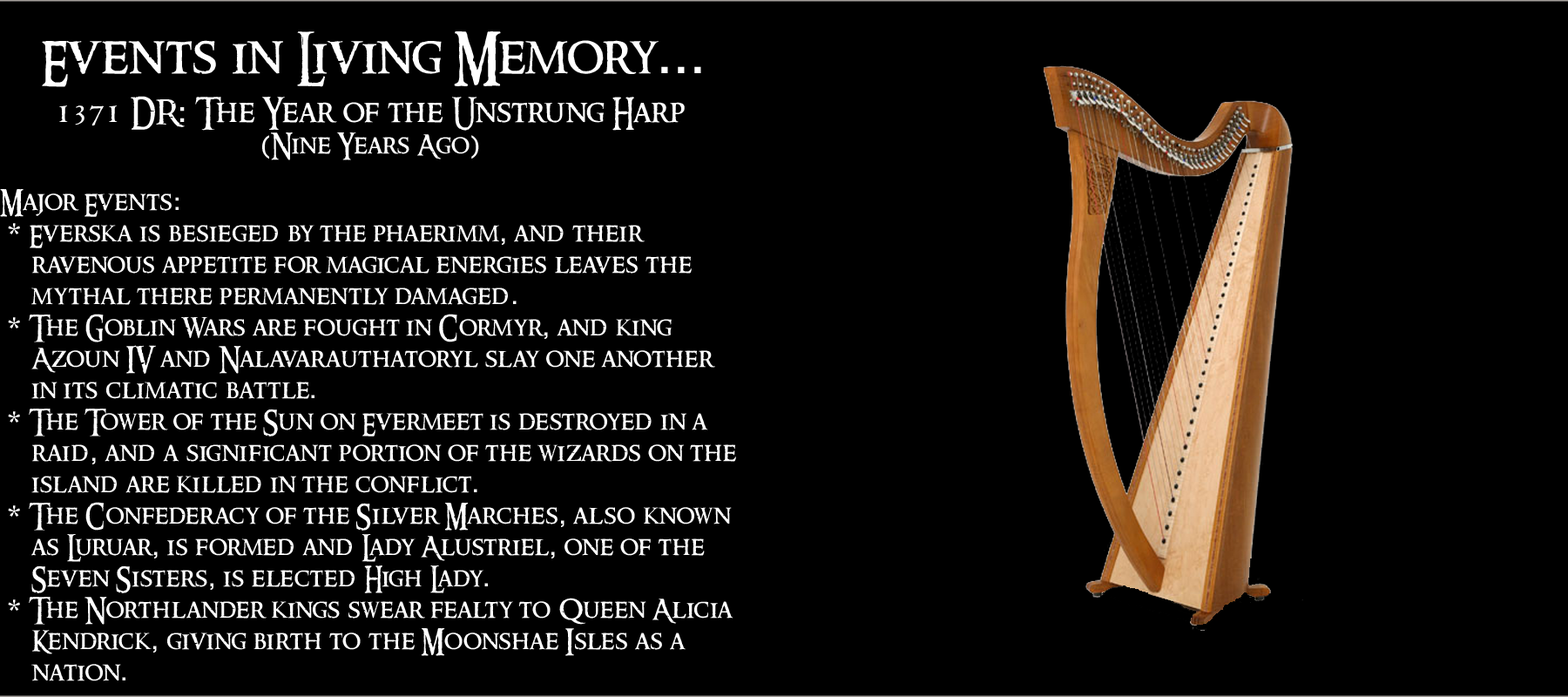
<style>
.page{position:relative;width:1568px;height:697px;background:#000000}
.page>*{position:absolute;margin:0}
.t1{font:26.1px "RingbearerMedium";letter-spacing:0.025em;color:#ffffff}
.t2{font:15.7px "RingbearerMedium";letter-spacing:0.025em;color:#ffffff}
.t3{font:52.3px "RingbearerMedium";letter-spacing:0.025em;color:#ffffff}
.t4{font:52.3px "Rockwell";letter-spacing:0.025em;color:#ffffff}
.t5{font:31.4px "RingbearerMedium";letter-spacing:0.025em;color:#ffffff}
.t6{font:31.4px "Rockwell";letter-spacing:0.025em;color:#ffffff}
.t7{font:26.1px "Rockwell";letter-spacing:0.025em;color:#ffffff}
</style>
<div class="page">
<p class="t1" style="left:0px;top:31px;width:736px;height:650px;text-align:center"><span class="t2"><br></span><span class="t3">Events in Living Memory</span><span class="t4">...<br><br></span><span class="t5">1371 DR</span><span class="t6">:</span><span class="t5"> The Year of the Unstrung Harp<br></span><span class="t7">(</span>Nine Years Ago<span class="t7">)<br><br></span>Major Events<span class="t7">:<br> * </span>Everska is besieged by the phaerimm<span class="t7">,</span> and their <br> ravenous appetite for magical energies leaves the <br> mythal there permanently damaged<span class="t7">.<br> * </span>The Goblin Wars are fought in Cormyr<span class="t7">,</span> and king <br> Azoun IV and Nalavarauthatoryl slay one another <br> in its climatic battle<span class="t7">.<br> * </span>The Tower of the Sun on Evermeet is destroyed in a <br> raid<span class="t7">,</span> and a significant portion of the wizards on the <br> island are killed in the conflict<span class="t7">.<br> * </span>The Confederacy of the Silver Marches<span class="t7">,</span> also known <br> as Luruar<span class="t7">,</span> is formed and Lady Alustriel<span class="t7">,</span> one of the <br> Seven Sisters<span class="t7">,</span> is elected High Lady<span class="t7">.<br> * </span>The Northlander kings swear fealty to Queen Alicia <br> Kendrick<span class="t7">,</span> giving birth to the Moonshae Isles as a <br> nation<span class="t7">.</span></p>
</div>
